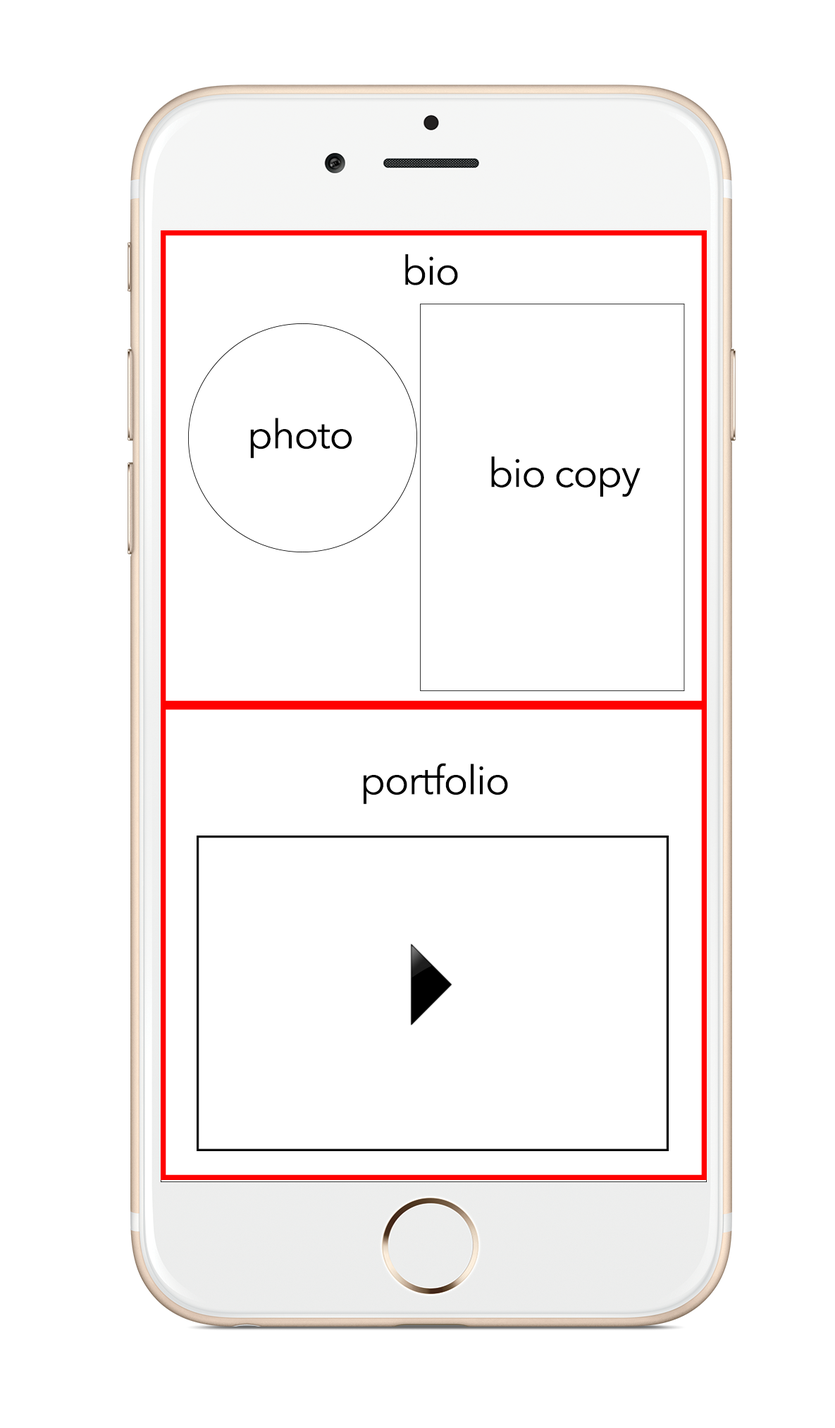
<style>
.page{position:relative;width:835px;height:1428px;background:#ffffff}
.page>*{position:absolute;margin:0}
.t1{font:40.2px "AvenirNext-Regular";letter-spacing:-0.025em;color:#000000}
</style>
<div class="page">
<p class="t1" style="left:405px;top:254px;width:53px;height:31px">bio</p>
<p class="t1" style="left:250px;top:418px;width:102px;height:41px">photo</p>
<p class="t1" style="left:491px;top:457px;width:149px;height:40px">bio copy</p>
<p class="t1" style="left:364px;top:763px;width:144px;height:42px">portfolio</p>
</div>
